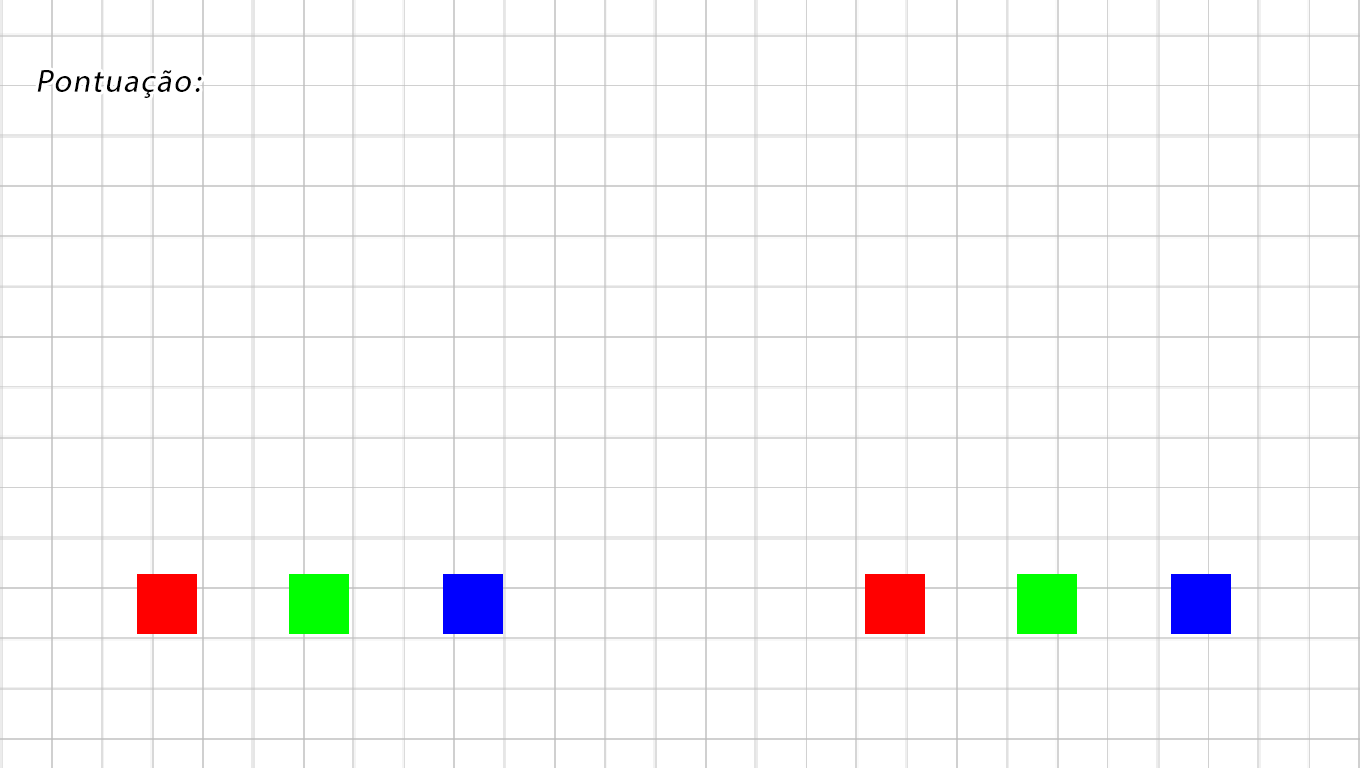
<style>
.page{position:relative;width:1360px;height:768px;background:#ffffff}
.page>*{position:absolute;margin:0}
.t1{font:32px "MyriadPro-Regular";letter-spacing:0.05em;color:#000000;font-style:italic}
</style>
<div class="page">
<p class="t1" style="left:37px;top:70px;width:165px;height:28px">:Pontuação</p>
</div>
